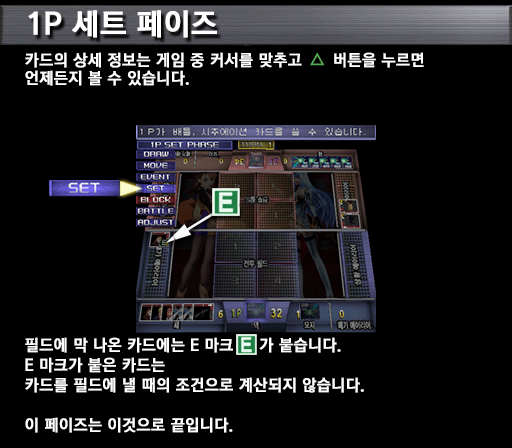
<style>
.page{position:relative;width:512px;height:448px;background:#000000}
.page>*{position:absolute;margin:0}
.t1{font:30px "KoreanGD15-R";color:#ffffff;font-weight:bold}
.t2{font:16px/18px "KoreanGD15-R";color:#ffffff;font-weight:bold}
.t3{font:16px/20px "KoreanGD15-R";color:#ffffff;font-weight:bold}
</style>
<div class="page">
<p class="t1" style="left:28px;top:10px;width:189px;height:28px">1P 세트 페이즈</p>
<p class="t2" style="left:25px;top:52px;width:399px;height:34px">카드의 상세 정보는 게임 중 커서를 맞추고      버튼을 누르면<br>언제든지 볼 수 있습니다.</p>
<p class="t3" style="left:25px;top:337px;width:339px;height:96px">필드에 막 나온 카드에는 E 마크     가 붙습니다.<br>E 마크가 붙은 카드는<br>카드를 필드에 낼 때의 조건으로 계산되지 않습니다.<br><br>이 페이즈는 이것으로 끝입니다.</p>
</div>
